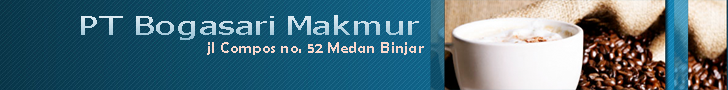
<style>
.page{position:relative;width:728px;height:90px}
.page>*{position:absolute;margin:0}
.t1{font:25.3px "Tahoma";color:#bed8e5;scale:1.46 1}
.t2{font:16.2px "BerlinSansFBDemi-Bold";color:#fad8cd;scale:0.96 1}
</style>
<div class="page">
<p class="t1" style="left:81px;top:15px;width:338px;height:25px">PT Bogasari Makmur</p>
<p class="t2" style="left:207px;top:42px;width:217px;height:13px">jl Compos no. 52 Medan Binjar</p>
</div>
